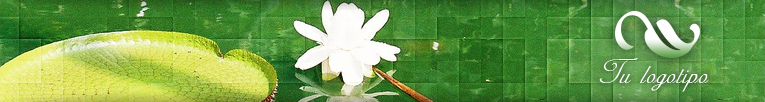
<style>
.page{position:relative;width:765px;height:102px}
.page>*{position:absolute;margin:0}
.t1{font:40px "AdineKirnberg-Script";letter-spacing:0.01em;color:#ffffff}
</style>
<div class="page">
<p class="t1" style="left:599px;top:58px;width:110px;height:34px">Tu logotipo</p>
</div>
